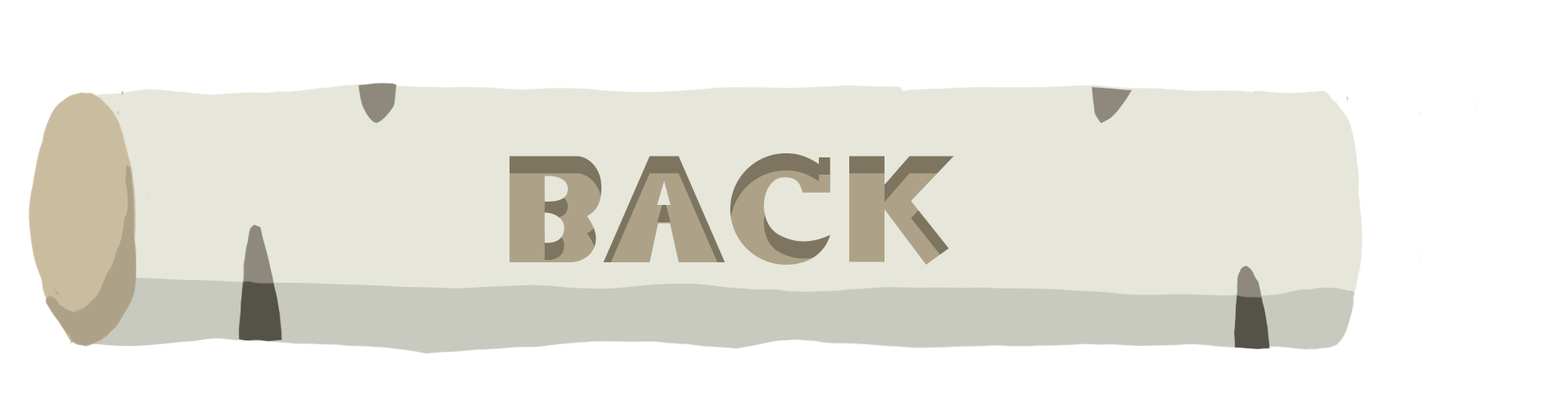
<style>
.page{position:relative;width:1568px;height:409px;background:#ffffff}
.page>*{position:absolute;margin:0}
.t1{font:148px "BadTyp-Regular";color:#ada288}
</style>
<div class="page">
<p class="t1" style="left:510px;top:153px;width:444px;height:112px">back</p>
</div>
